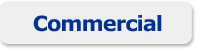
<style>
.page{position:relative;width:200px;height:53px;background:#efefef}
.page>*{position:absolute;margin:0}
.t1{font:21px "Verdana-Bold";letter-spacing:-0.05em;color:#00309c}
</style>
<div class="page">
<p class="t1" style="left:33px;top:15px;width:129px;height:17px">Commercial</p>
</div>
